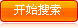
<style>
.page{position:relative;width:78px;height:28px}
.page>*{position:absolute;margin:0}
.t1{font:12px "SimSun";color:#ffffff}
</style>
<div class="page">
<p class="t1" style="left:14px;top:4px;width:47px;height:11px">开始搜索</p>
</div>
